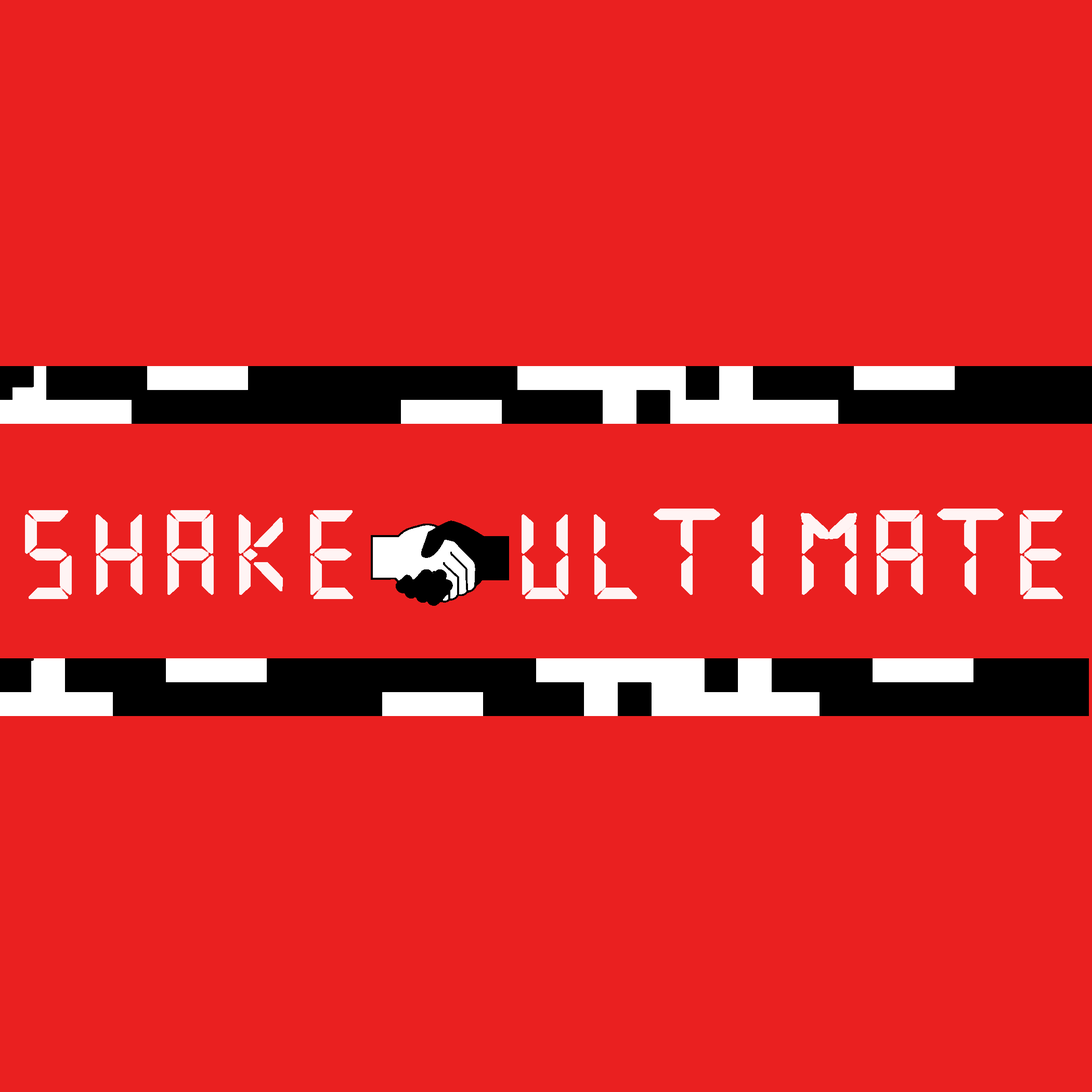
<style>
.page{position:relative;width:1092px;height:1092px;background:#ea2020}
.page>*{position:absolute;margin:0}
.t1{font:85px "DigitalNumbers-Regular";color:#fff4f4;text-transform:uppercase;font-weight:bold}
.t2{font:78px "DigitalNumbers-Regular";color:#fff4f4}
</style>
<div class="page">
<p class="t1" style="left:25px;top:509px;width:1038px;height:91px"><span class="t2"><br></span>Shake  Ultimate</p>
</div>
